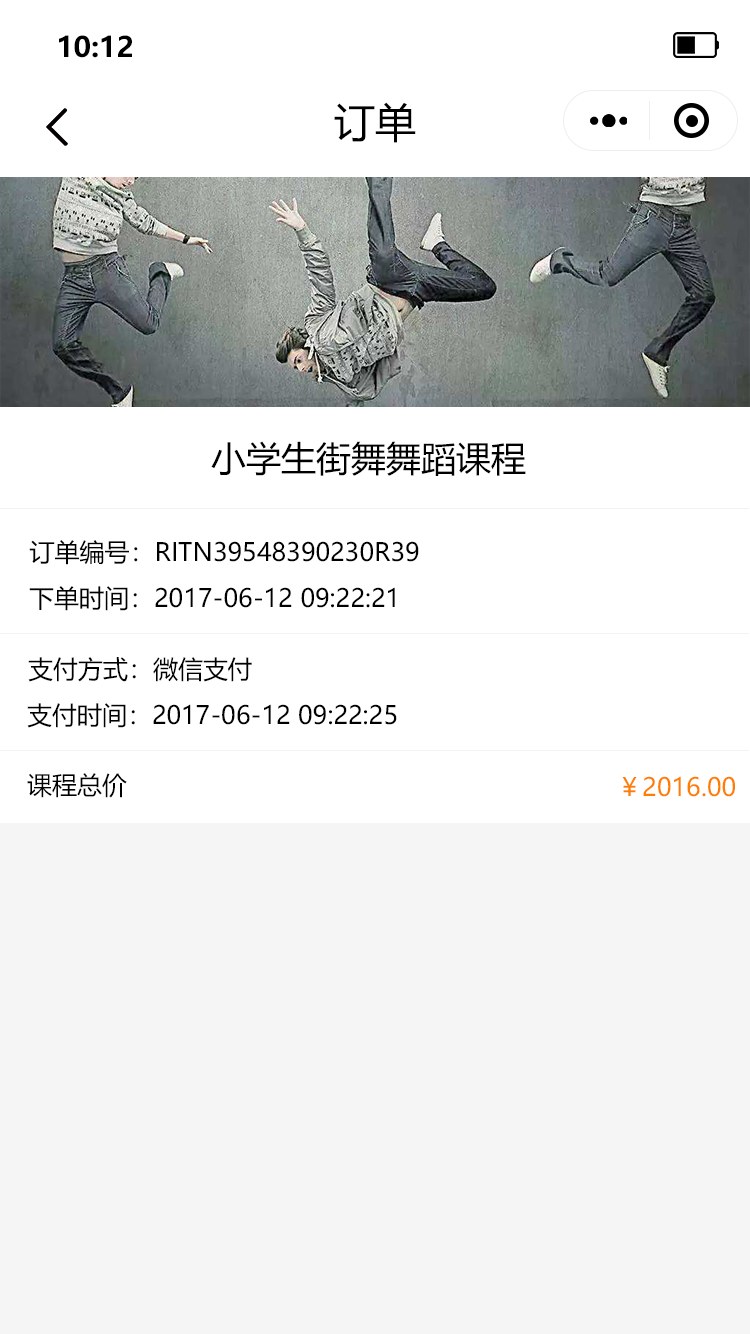
<style>
.page{position:relative;width:750px;height:1334px;background:#ffffff}
.page>*{position:absolute;margin:0}
.t1{font:28.1px "MicrosoftYaHei-Bold";color:#000000}
.t2{font:41px "MicrosoftYaHei";color:#000000}
.t3{font:35px "MicrosoftYaHei";color:#000000}
.t4{font:25px "MicrosoftYaHei";color:#000000}
.t5{font:25px "MicrosoftYaHei";color:#ff7e00}
</style>
<div class="page">
<p class="t1" style="left:59px;top:35px;width:73px;height:23px">10:12</p>
<p class="t2" style="left:334px;top:102px;width:82px;height:41px">订单</p>
<p class="t3" style="left:211px;top:441px;width:315px;height:35px">小学生街舞舞蹈课程</p>
<p class="t4" style="left:29px;top:540px;width:390px;height:25px">订单编号：RITN39548390230R39</p>
<p class="t4" style="left:29px;top:586px;width:366px;height:25px">下单时间：2017-06-12 09:22:21</p>
<p class="t4" style="left:28px;top:657px;width:224px;height:25px">支付方式：微信支付</p>
<p class="t4" style="left:27px;top:703px;width:370px;height:25px">支付时间：2017-06-12 09:22:25</p>
<p class="t4" style="left:27px;top:773px;width:100px;height:25px">课程总价</p>
<p class="t5" style="left:622px;top:776px;width:113px;height:21px">￥2016.00</p>
</div>
